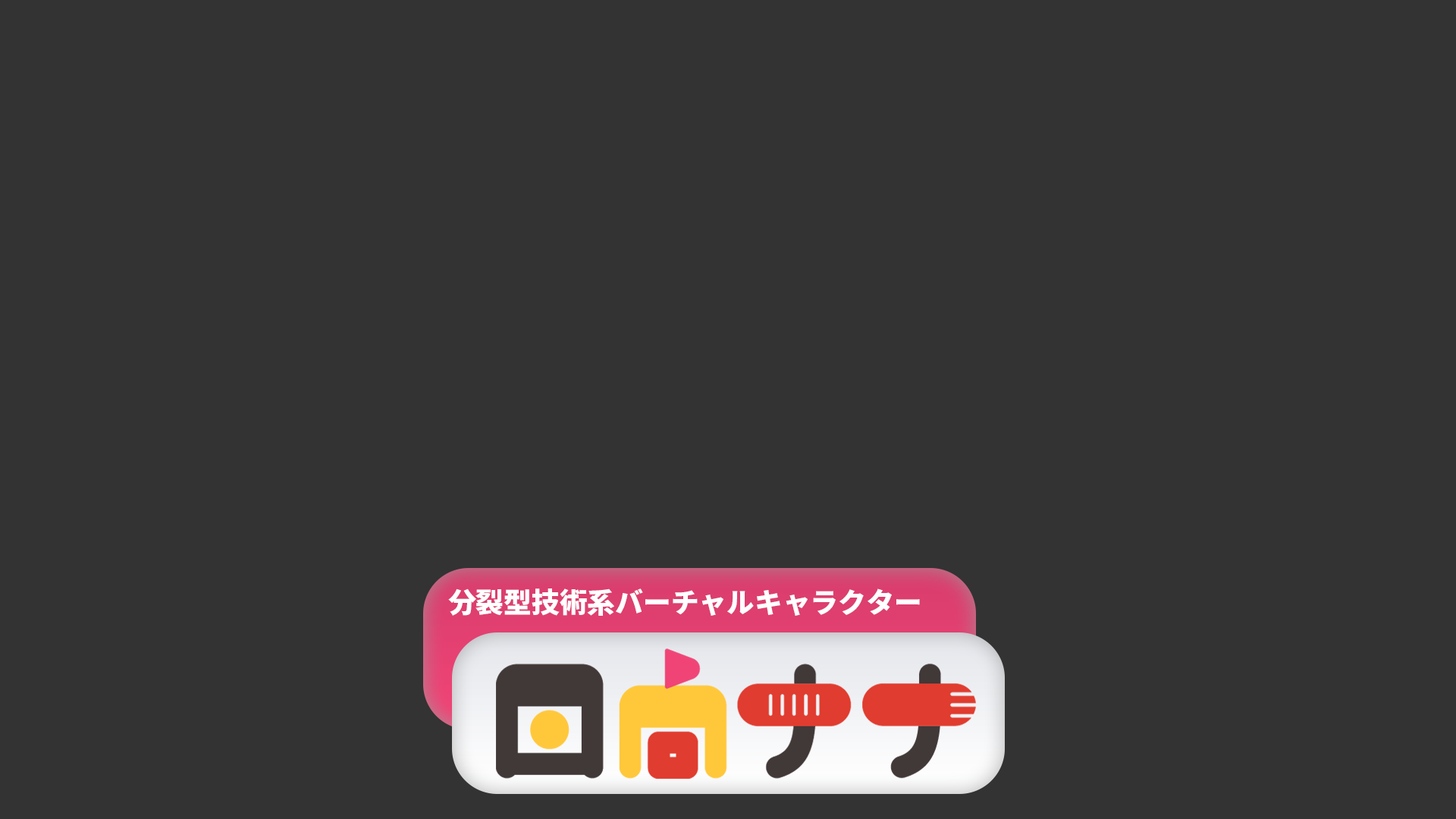
<style>
.page{position:relative;width:1456px;height:819px;background:#333333}
.page>*{position:absolute;margin:0}
.t1{font:27.9px "SourceHanSans-Heavy";color:#ffffff}
</style>
<div class="page">
<p class="t1" style="left:448px;top:588px;width:472px;height:28px">分裂型技術系バーチャルキャラクター</p>
</div>
